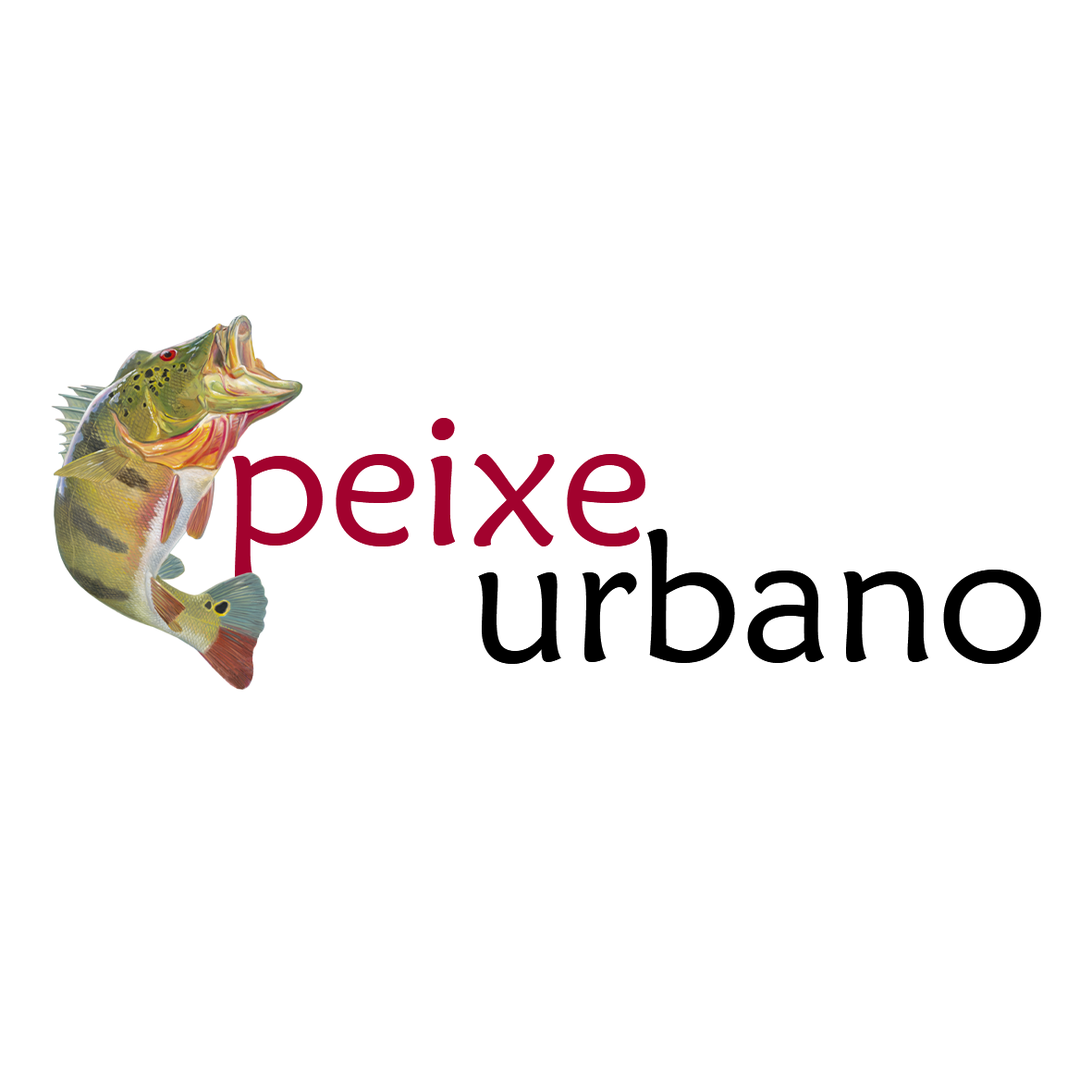
<style>
.page{position:relative;width:1092px;height:1092px;background:#ffffff}
.page>*{position:absolute;margin:0}
.t1{font:184.9px "MaiandraGD-Regular";color:#a2022e}
.t2{font:184.9px "MaiandraGD-Regular";color:#000000}
</style>
<div class="page">
<p class="t1" style="left:232px;top:418px;width:413px;height:167px">peixe</p>
<p class="t2" style="left:478px;top:529px;width:563px;height:135px">urbano</p>
</div>
